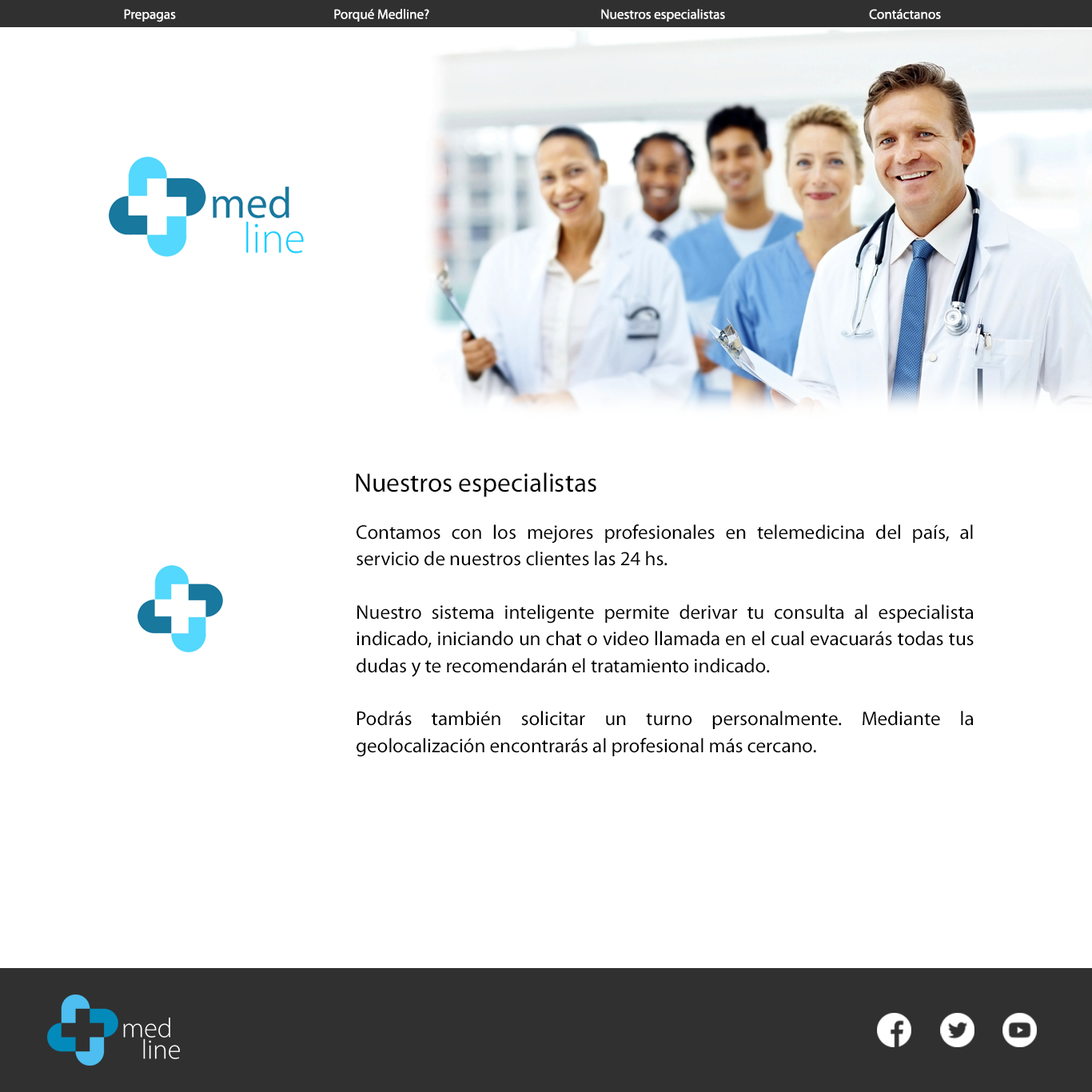
<style>
.page{position:relative;width:1092px;height:1092px;background:#ffffff}
.page>*{position:absolute;margin:0}
.t1{font:13.7px "MyriadPro-Regular";color:#ffffff}
.t2{font:26.6px "MyriadPro-Regular";color:#000000}
.t3{font:20px/26.6px "MyriadPro-Regular";color:#000000}
</style>
<div class="page">
<p class="t1" style="left:124px;top:9px;width:52px;height:13px">Prepagas</p>
<p class="t1" style="left:334px;top:9px;width:95px;height:13px">Porqué Medline?</p>
<p class="t1" style="left:601px;top:9px;width:124px;height:13px">Nuestros especialistas</p>
<p class="t1" style="left:869px;top:9px;width:72px;height:10px">Contáctanos</p>
<p class="t2" style="left:356px;top:472px;width:240px;height:25px">Nuestros especialistas</p>
<p class="t3" style="left:357px;top:524px;width:617px;height:233px;text-align:justify">Contamos con los mejores profesionales en telemedicina del país, al servicio de nuestros clientes las 24 hs.<br><br>Nuestro sistema inteligente permite derivar tu consulta al especialista indicado, iniciando un chat o video llamada en el cual evacuarás todas tus dudas y te recomendarán el tratamiento indicado. <br><br>Podrás también solicitar un turno personalmente. Mediante la geolocalización encontrarás al profesional más cercano.</p>
</div>
